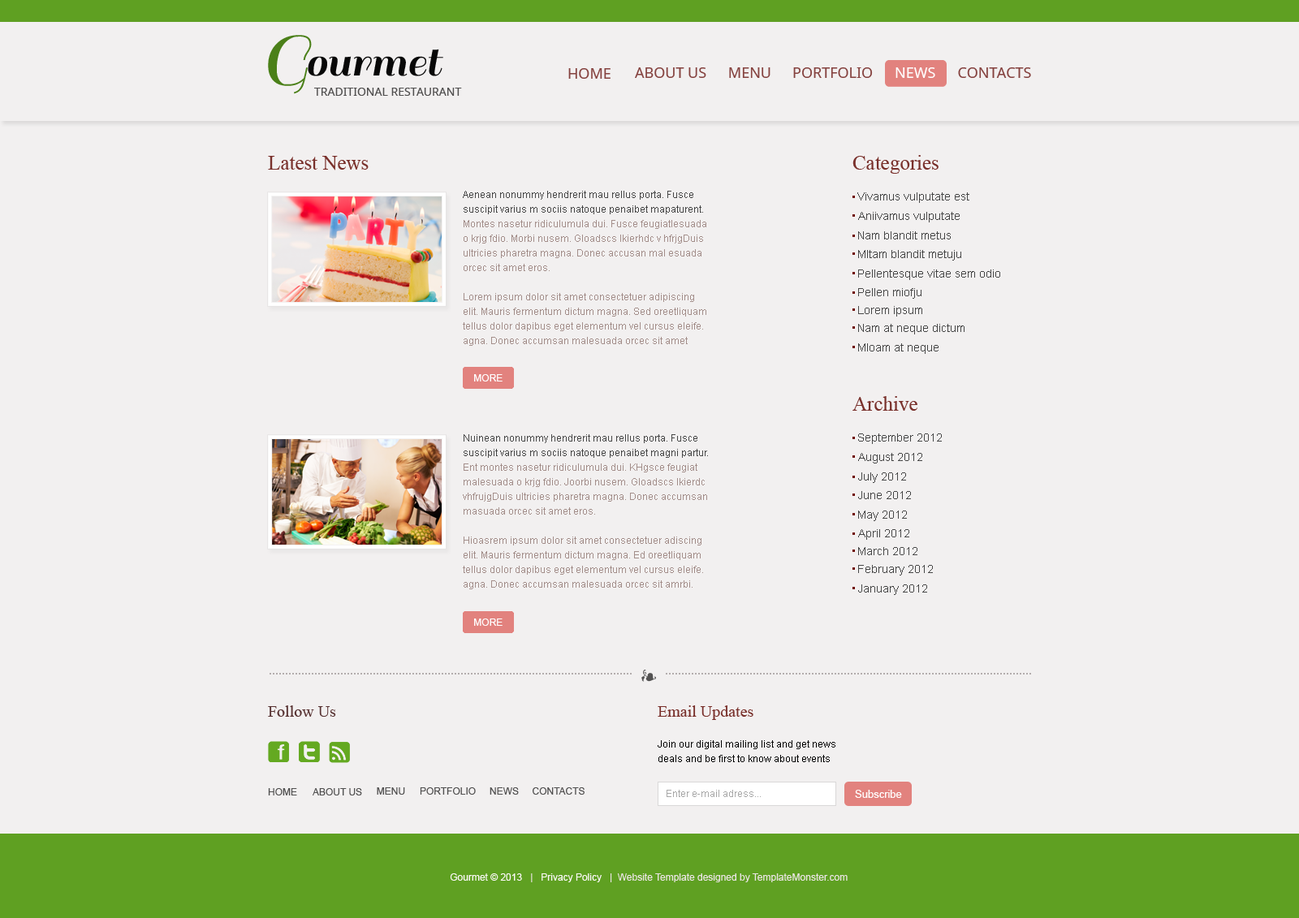
<style>
.page{position:relative;width:1299px;height:918px;background:#f2f0f0}
.page>*{position:absolute;margin:0}
.t1{font:73.1px "Sail-Regular";color:#4b8019}
.t2{font:48.7px "Sail-Regular";color:#080808}
.t3{font:14.6px "NotoSans";color:#85423f;text-transform:uppercase}
.t4{font:14.6px "NotoSans";color:#ffffff;text-transform:uppercase}
.t5{font:11.4px "NotoSans";color:#504f4f;text-transform:uppercase}
.t6{font:20.3px "TimesNewRomanPSMT";color:#79302b}
.t7{font:9.7px/14.6px "ArialMT";color:#a38e8a}
.t8{font:11.4px "ArialMT";color:#464646}
.t9{font:11.4px "ArialMT";color:#484848}
.t10{font:9.7px "ArialMT";color:#ffffff;text-transform:uppercase}
.t11{font:16.2px "TimesNewRomanPSMT";color:#583333}
.t12{font:16.2px "TimesNewRomanPSMT";color:#79302b}
.t13{font:9.7px/14.6px "ArialMT";color:#000000}
.t14{font:9.7px "ArialMT";color:#504f4f;text-transform:uppercase}
.t15{font:9.7px "ArialMT";color:#a8a8a8}
.t16{font:10.6px "ArialMT";color:#ffffff}
.t17{font:9.7px "ArialMT";color:#ebe5e5}
.t18{font:9.7px "ArialMT";color:#fcf9f9}
</style>
<div class="page">
<p class="t1" style="left:268px;top:35px;width:44px;height:59px">G</p>
<p class="t2" style="left:308px;top:49px;width:135px;height:27px">ourmet</p>
<p class="t3" style="left:568px;top:68px;width:42px;height:11px">Home</p>
<p class="t3" style="left:635px;top:67px;width:71px;height:11px">About Us</p>
<p class="t3" style="left:729px;top:67px;width:41px;height:11px">Menu</p>
<p class="t3" style="left:793px;top:67px;width:80px;height:11px">Portfolio</p>
<p class="t4" style="left:895px;top:67px;width:40px;height:11px">News</p>
<p class="t3" style="left:958px;top:67px;width:73px;height:11px">Contacts</p>
<p class="t5" style="left:314px;top:88px;width:148px;height:8px">Traditional restaurant</p>
<p class="t6" style="left:268px;top:156px;width:101px;height:14px">Latest News</p>
<p class="t6" style="left:852px;top:155px;width:86px;height:19px">Categories</p>
<p class="t7" style="left:463px;top:191px;width:243px;height:155px">Aenean nonummy hendrerit mau rellus porta. Fusce suscipit varius m sociis natoque penaibet mapaturent. Montes nasetur ridiculumula dui. Fusce feugiatlesuada o krjg fdio. Morbi nusem. GIoadscs lkierhdc v hfrjgDuis ultricies pharetra magna. Donec accusan mal esuada orcec sit amet eros.   <br>  <br>Lorem ipsum dolor sit amet consectetuer adipiscing elit. Mauris fermentum dictum magna. Sed oreetliquam tellus dolor dapibus eget elementum vel cursus eleife. agna. Donec accumsan malesuada orcec sit amet eros. Morbi nusem joldukp.<br>Duis ultricies pharetra magna.</p>
<p class="t8" style="left:857px;top:192px;width:112px;height:11px">Vivamus vulputate est</p>
<p class="t8" style="left:858px;top:212px;width:101px;height:10px">Aniivamus vulputate est</p>
<p class="t8" style="left:858px;top:231px;width:93px;height:8px">Nam blandit metus</p>
<p class="t8" style="left:858px;top:250px;width:103px;height:11px">Mltam blandit metuju</p>
<p class="t8" style="left:858px;top:270px;width:142px;height:10px">Pellentesque vitae sem odio</p>
<p class="t9" style="left:858px;top:288px;width:63px;height:11px">Pellen miofju tesque vitae sem odio</p>
<p class="t9" style="left:858px;top:306px;width:64px;height:11px">Lorem ipsum</p>
<p class="t8" style="left:858px;top:324px;width:106px;height:10px">Nam at neque dictum</p>
<p class="t8" style="left:858px;top:343px;width:80px;height:11px">Mloam at neque</p>
<p class="t10" style="left:474px;top:374px;width:28px;height:8px">More</p>
<p class="t6" style="left:852px;top:396px;width:65px;height:15px">Archive</p>
<p class="t7" style="left:463px;top:434px;width:245px;height:155px">Nuinean nonummy hendrerit mau rellus porta. Fusce suscipit varius m sociis natoque penaibet magni partur.<br>Ent montes nasetur ridiculumula dui. KHgsce feugiat malesuada o krjg fdio. Joorbi nusem. GIoadscs lkierdc vhfrujgDuis ultricies pharetra magna. Donec accumsan masuada orcec sit amet eros.   <br>  <br>Hioasrem ipsum dolor sit amet consectetuer adiscing elit. Mauris fermentum dictum magna. Ed oreetliquam tellus dolor dapibus eget elementum vel cursus eleife. agna. Donec accumsan malesuada orcec sit amrbi. nusem joldukp.<br>Duis ultricies pharetra magna.</p>
<p class="t8" style="left:858px;top:433px;width:84px;height:11px">September 2012</p>
<p class="t8" style="left:858px;top:453px;width:64px;height:11px">August 2012</p>
<p class="t8" style="left:858px;top:472px;width:48px;height:11px">July 2012</p>
<p class="t8" style="left:858px;top:491px;width:53px;height:8px">June 2012</p>
<p class="t8" style="left:858px;top:511px;width:49px;height:10px">May 2012</p>
<p class="t9" style="left:858px;top:529px;width:51px;height:11px">April 2012</p>
<p class="t9" style="left:858px;top:547px;width:59px;height:8px">March 2012</p>
<p class="t8" style="left:858px;top:565px;width:75px;height:11px">February 2012</p>
<p class="t8" style="left:858px;top:584px;width:69px;height:11px">January 2012</p>
<p class="t10" style="left:474px;top:619px;width:28px;height:7px">More</p>
<p class="t11" style="left:268px;top:705px;width:68px;height:12px">Follow Us</p>
<p class="t12" style="left:658px;top:705px;width:95px;height:15px">Email Updates</p>
<p class="t13" style="left:658px;top:740px;width:177px;height:22px">Join our digital mailing list and get news deals and be first to know about events</p>
<p class="t14" style="left:268px;top:788px;width:29px;height:8px">Home</p>
<p class="t14" style="left:313px;top:788px;width:49px;height:8px">About us</p>
<p class="t14" style="left:377px;top:787px;width:28px;height:8px">Menu</p>
<p class="t14" style="left:420px;top:787px;width:56px;height:8px">Portfolio</p>
<p class="t14" style="left:489px;top:787px;width:30px;height:8px">News</p>
<p class="t14" style="left:533px;top:787px;width:51px;height:8px">Contacts</p>
<p class="t15" style="left:666px;top:790px;width:95px;height:7px">Enter e-mail adress...</p>
<p class="t16" style="left:855px;top:790px;width:47px;height:8px">Subscribe</p>
<p class="t17" style="left:450px;top:873px;width:397px;height:9px"><span class="t18">Gourmet © 2013   </span>| <span class="t18">  Privacy Policy  </span> |  Website Template designed by TemplateMonster.com</p>
</div>
